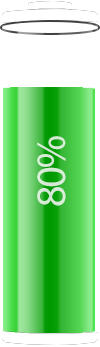
<style>
.page{position:relative;width:100px;height:347px;background:#ffffff}
.page>*{position:absolute;margin:0}
.t1{font:42px "MyriadPro-Regular";letter-spacing:-0.05em;color:#d5ead5}
</style>
<div class="page">
<p class="t1" style="left:37px;top:136px;width:29px;height:70px;rotate:-90deg">80%</p>
</div>
